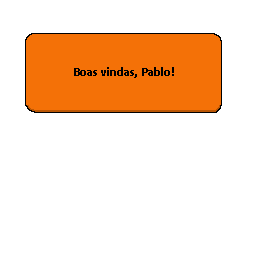
<style>
.page{position:relative;width:256px;height:256px;background:#ffffff}
.page>*{position:absolute;margin:0}
.t1{font:12.5px "Calibri-Bold";color:#000000}
</style>
<div class="page">
<p class="t1" style="left:74px;top:67px;width:100px;height:11px">Boas vindas, Pablo!</p>
</div>
